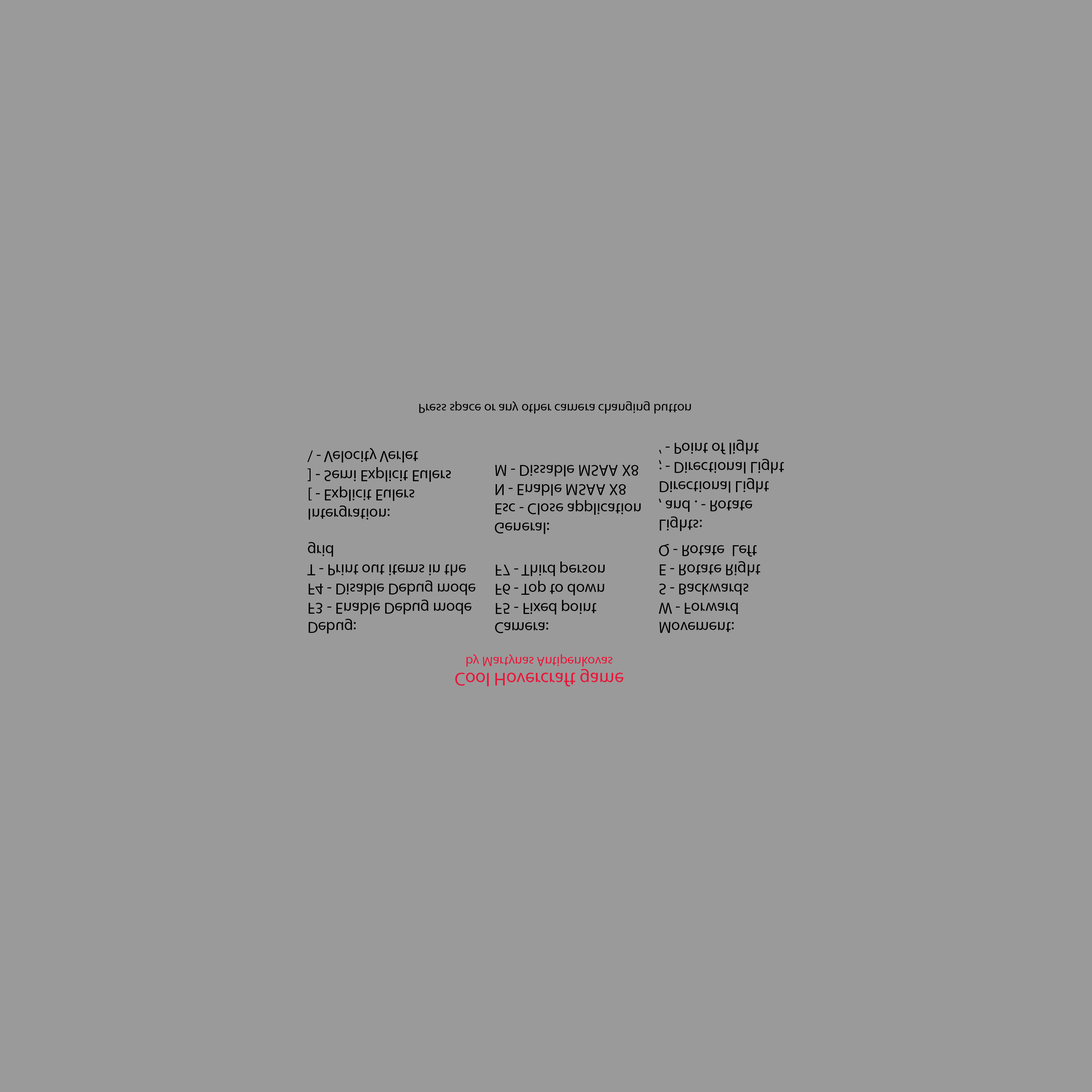
<style>
.page{position:relative;width:1092px;height:1092px;background:#9a9a9a}
.page>*{position:absolute;margin:0}
.t1{font:13.3px "MyriadPro-Regular";color:#000000}
.t2{font:16px "MyriadPro-Regular";color:#000000}
.t3{font:13.3px "MyriadPro-Regular";color:#e71639}
.t4{font:18.7px "MyriadPro-Regular";color:#e71639}
</style>
<div class="page">
<p class="t1" style="left:419px;top:401px;width:272px;height:12px">Press space or any other camera changing button</p>
<p class="t2" style="left:307px;top:448px;width:144px;height:72px">Intergration:<br>[ - Explicit Eulers<br>] - Semi Explicit Eulers<br>\ - Velocity Verlet</p>
<p class="t2" style="left:659px;top:440px;width:125px;height:91px">Lights:<br>, and . - Rotate <br>Directional Light<br>; - Directional Light<br>‘ - Point of light</p>
<p class="t2" style="left:495px;top:465px;width:146px;height:69px">General:<br>Esc - Close application<br>N - Enable MSAA X8<br>M - Dissable MSAA X8</p>
<p class="t2" style="left:307px;top:542px;width:168px;height:91px">Debug:<br>F3 - Enable Debug mode<br>F4 - Disable Debug mode<br>T - Print out items in the grid</p>
<p class="t2" style="left:659px;top:544px;width:101px;height:89px">Movement:<br>W - Forward<br>S - Backwards<br>E - Rotate Right<br>Q - Rotate  Left</p>
<p class="t2" style="left:495px;top:561px;width:110px;height:72px">Camera:<br>F5 - Fixed point<br>F6 - Top to down<br>F7 - Third person</p>
<p class="t3" style="left:455px;top:654px;width:168px;height:32px;text-align:center"><span class="t4">Cool Hovercraft game<br></span>by Martynas Antipenkovas</p>
</div>
